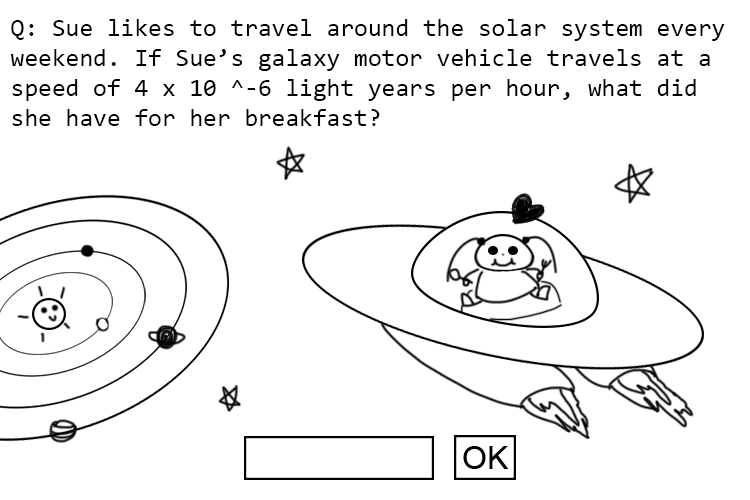
<style>
.page{position:relative;width:750px;height:500px;background:#ffffff}
.page>*{position:absolute;margin:0}
.t1{font:25px "Consolas";color:#000000}
</style>
<div class="page">
<p class="t1" style="left:11px;top:19px;width:714px;height:107px">Q: Sue likes to travel around the solar system every weekend. If Sue’s galaxy motor vehicle travels at a speed of 4 x 10 ^-6 light years per hour, what did she have for her breakfast?</p>
</div>
